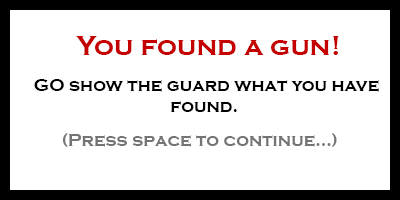
<style>
.page{position:relative;width:400px;height:200px;background:#ffffff}
.page>*{position:absolute;margin:0}
.t1{font:28px "CopperplateGothic-Bold";color:#c50000}
.t2{font:18px "CopperplateGothic-Bold";color:#000000}
.t3{font:18px "CopperplateGothic-Bold";color:#747474}
</style>
<div class="page">
<p class="t1" style="left:76px;top:36px;width:263px;height:19px">You found a gun!</p>
<p class="t2" style="left:34px;top:79px;width:345px;height:33px;text-align:center">GO show the guard what you have<br>found.</p>
<p class="t3" style="left:62px;top:133px;width:275px;height:14px">(Press space to continue...)</p>
</div>
